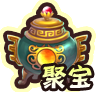
<style>
.page{position:relative;width:97px;height:92px;background:#ffffff}
.page>*{position:absolute;margin:0}
.t1{font:26px "DFPBuDingW12"}
</style>
<div class="page">
<p class="t1" style="left:42px;top:64px;width:50px;height:25px">聚宝</p>
</div>
